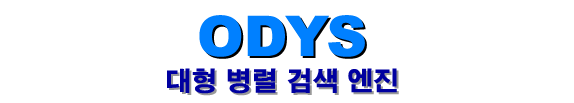
<style>
.page{position:relative;width:574px;height:103px;background:#ffffff}
.page>*{position:absolute;margin:0}
.t1{font:56px "Arial-Black";color:#0080ff}
.t2{font:26px "H2gtrE";color:#0000a0}
</style>
<div class="page">
<p class="t1" style="left:199px;top:15px;width:166px;height:42px">ODYS</p>
<p class="t2" style="left:167px;top:68px;width:230px;height:26px">대형 병렬 검색 엔진</p>
</div>
